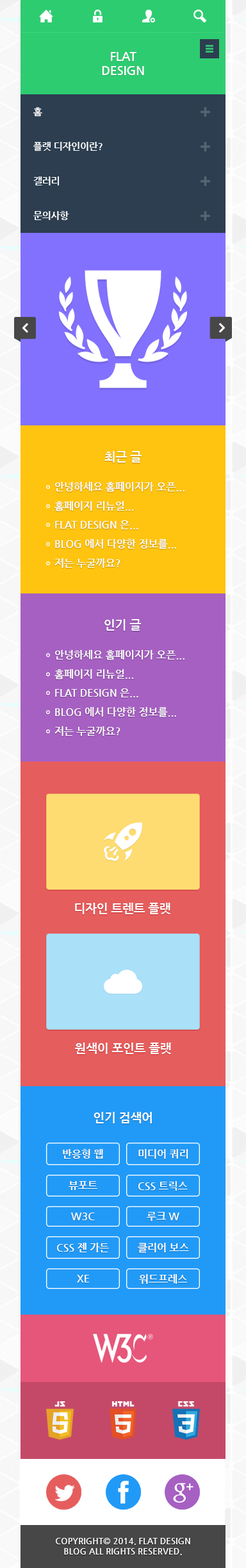
<style>
.page{position:relative;width:246px;height:1568px}
.page>*{position:absolute;margin:0}
.t1{font:12px "NanumGothicBold";color:#ffffff}
.t2{font:9.4px "NanumGothicBold";color:#ffffff}
.t3{font:10.3px "NanumGothicBold";color:#ffffff}
.t4{font:8.6px "NanumGothicBold";color:#ffffff}
</style>
<div class="page">
<p class="t1" style="left:102px;top:52px;width:42px;height:23px;text-align:center">FLAT<br>DESIGN</p>
<p class="t2" style="left:33px;top:107px;width:9px;height:10px">홈</p>
<p class="t2" style="left:33px;top:142px;width:70px;height:9px">플랫 디자인이란?</p>
<p class="t2" style="left:33px;top:176px;width:26px;height:9px">갤러리</p>
<p class="t2" style="left:33px;top:211px;width:36px;height:9px">문의사항</p>
<p class="t1" style="left:105px;top:451px;width:37px;height:12px">최근 글</p>
<p class="t3" style="left:55px;top:482px;width:130px;height:10px">안녕하세요 홈페이지가 오픈...</p>
<p class="t3" style="left:55px;top:501px;width:79px;height:10px">홈페이지 리뉴얼...</p>
<p class="t3" style="left:55px;top:520px;width:84px;height:9px">FLAT DESIGN 은...</p>
<p class="t3" style="left:55px;top:539px;width:121px;height:10px">BLOG 에서 다양한 정보를...</p>
<p class="t3" style="left:55px;top:558px;width:66px;height:10px">저는 누굴까요?</p>
<p class="t1" style="left:105px;top:619px;width:36px;height:12px">인기 글</p>
<p class="t3" style="left:55px;top:650px;width:130px;height:10px">안녕하세요 홈페이지가 오픈...</p>
<p class="t3" style="left:55px;top:669px;width:79px;height:10px">홈페이지 리뉴얼...</p>
<p class="t3" style="left:55px;top:688px;width:84px;height:9px">FLAT DESIGN 은...</p>
<p class="t3" style="left:55px;top:707px;width:121px;height:10px">BLOG 에서 다양한 정보를...</p>
<p class="t3" style="left:55px;top:726px;width:66px;height:10px">저는 누굴까요?</p>
<p class="t1" style="left:75px;top:903px;width:96px;height:11px">디자인 트렌트 플랫</p>
<p class="t1" style="left:75px;top:1043px;width:96px;height:11px">원색이 포인트 플랫</p>
<p class="t1" style="left:94px;top:1112px;width:58px;height:11px">인기 검색어</p>
<p class="t3" style="left:63px;top:1149px;width:40px;height:10px">반응형 웹</p>
<p class="t3" style="left:139px;top:1149px;width:50px;height:10px">미디어 쿼리</p>
<p class="t3" style="left:69px;top:1181px;width:29px;height:9px">뷰포트</p>
<p class="t3" style="left:139px;top:1181px;width:49px;height:10px">CSS 트릭스</p>
<p class="t3" style="left:71px;top:1213px;width:24px;height:7px">W3C</p>
<p class="t3" style="left:147px;top:1212px;width:33px;height:9px">루크 W</p>
<p class="t3" style="left:57px;top:1243px;width:53px;height:9px">CSS 젠 가든</p>
<p class="t3" style="left:138px;top:1243px;width:51px;height:10px">클리어 보스</p>
<p class="t3" style="left:77px;top:1275px;width:12px;height:8px">XE</p>
<p class="t3" style="left:139px;top:1274px;width:49px;height:10px">워드프레스</p>
<p class="t4" style="left:56px;top:1538px;width:135px;height:17px;text-align:center">COPYRIGHT© 2014. FLAT DESIGN<br>BLOG ALL RIGHTS RESERVED.</p>
</div>
